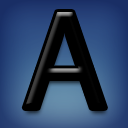
<style>
.page{position:relative;width:128px;height:128px}
.page>*{position:absolute;margin:0}
.t1{font:142.1px "MyriadPro-Regular";color:#000000}
</style>
<div class="page">
<p class="t1" style="left:24px;top:12px;width:81px;height:96px">A</p>
</div>
